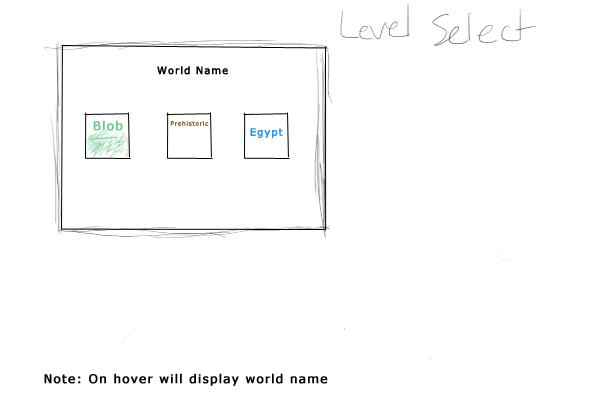
<style>
.page{position:relative;width:600px;height:400px;background:#ffffff}
.page>*{position:absolute;margin:0}
.t1{font:10px "Verdana";letter-spacing:0.075em;color:#000000;font-weight:bold}
.t2{font:12px "Verdana";letter-spacing:0.075em;color:#65c78c;font-weight:bold}
.t3{font:6px "Verdana";letter-spacing:0.075em;color:#845b25;font-weight:bold}
.t4{font:10px "Verdana";letter-spacing:0.075em;color:#2795ea;font-weight:bold}
.t5{font:12px "Verdana";letter-spacing:0.075em;color:#000000;font-weight:bold}
</style>
<div class="page">
<p class="t1" style="left:157px;top:66px;width:71px;height:9px">World Name</p>
<p class="t2" style="left:93px;top:120px;width:30px;height:11px">Blob</p>
<p class="t3" style="left:170px;top:121px;width:39px;height:5px">Prehistoric</p>
<p class="t4" style="left:250px;top:128px;width:33px;height:10px">Egypt</p>
<p class="t5" style="left:44px;top:373px;width:284px;height:13px">Note: On hover will display world name</p>
</div>
